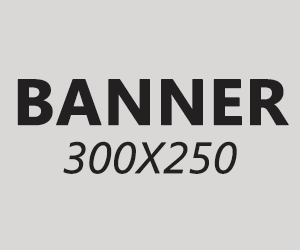
<style>
.page{position:relative;width:300px;height:250px;background:#dad7d7}
.page>*{position:absolute;margin:0}
.t1{font:64.5px "SegoeUI-Bold";color:#222020;text-transform:uppercase;font-weight:bold}
.t2{font:43.6px "SegoeUI-Italic";color:#222020;text-transform:uppercase;font-weight:bold}
</style>
<div class="page">
<p class="t1" style="left:17px;top:79px;width:272px;height:47px">BANNER</p>
<p class="t2" style="left:63px;top:141px;width:174px;height:33px">300x250</p>
</div>
